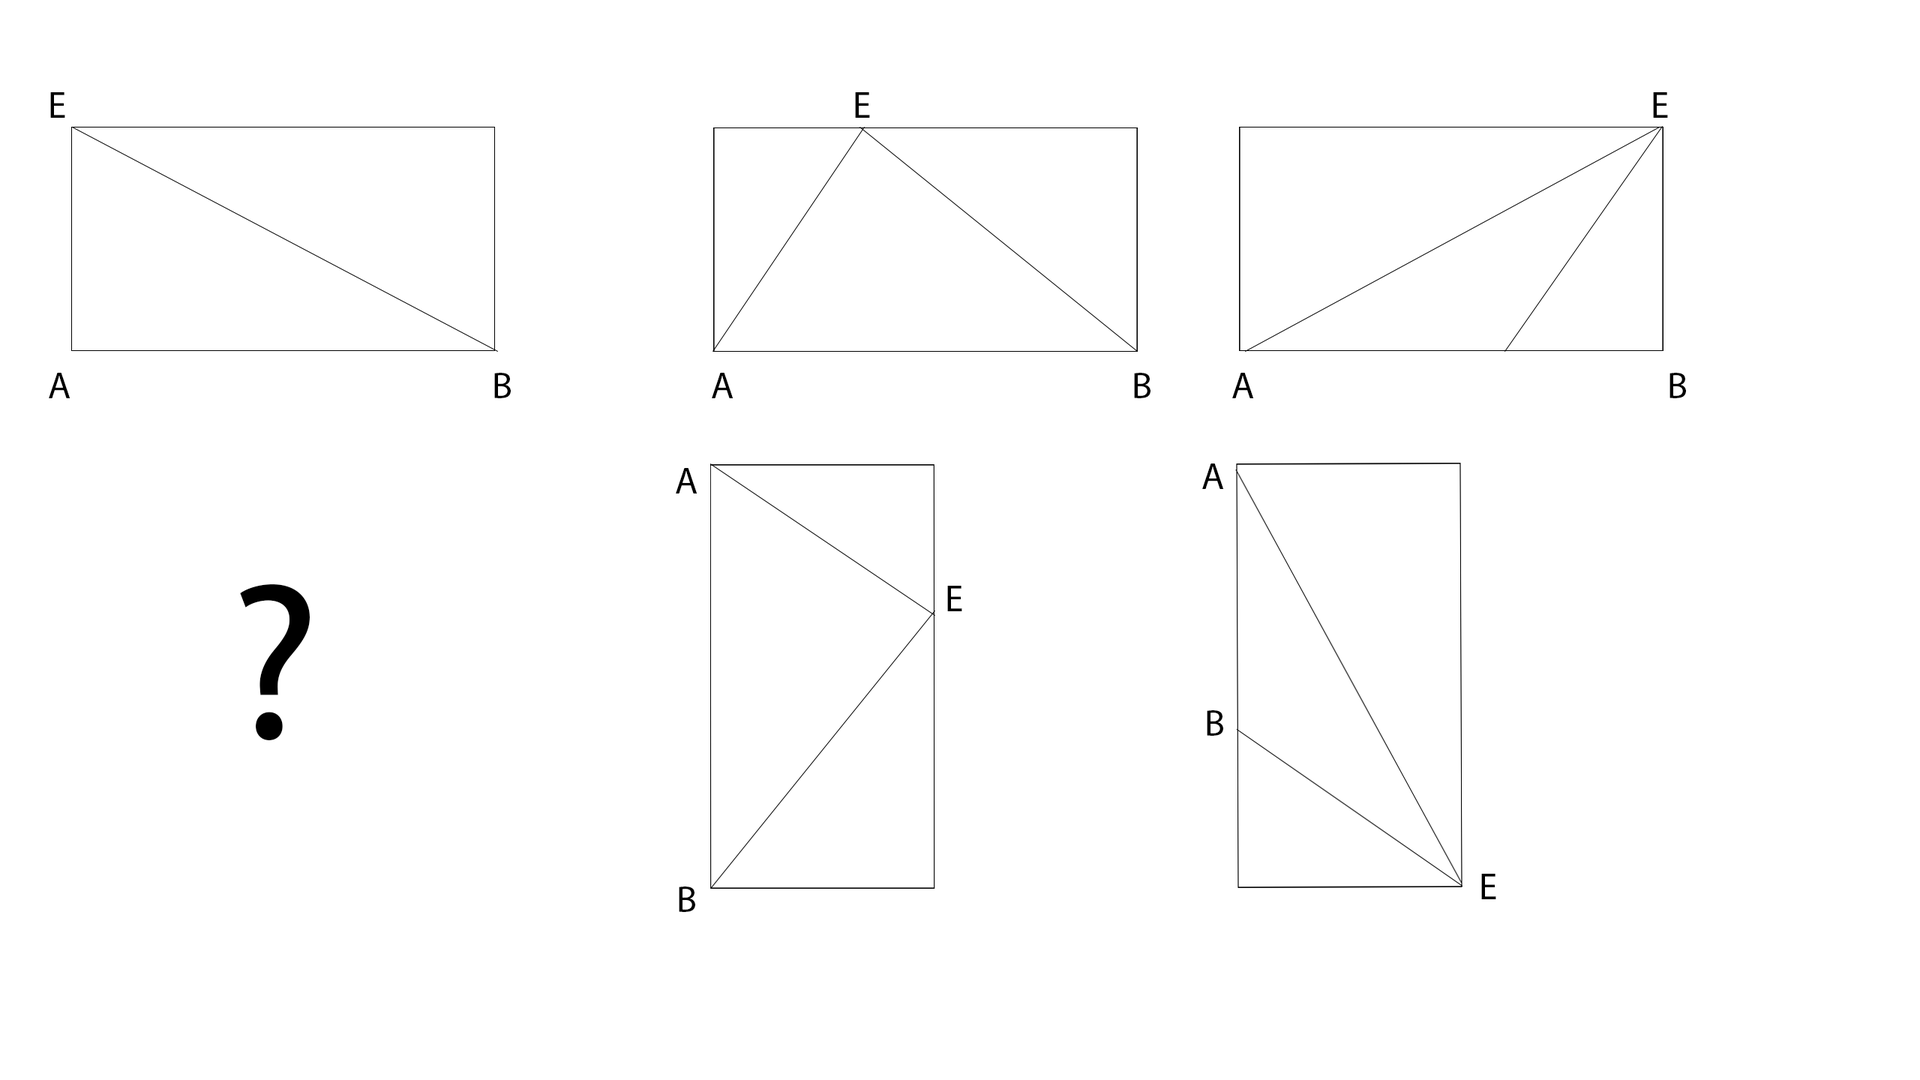
<style>
.page{position:relative;width:1920px;height:1080px;background:#ffffff}
.page>*{position:absolute;margin:0}
.t1{font:9px "MyriadPro-Regular";color:#000000}
.t2{font:225px "MyriadPro-Regular";color:#000000}
</style>
<div class="page">
<p class="t1" style="left:50px;top:92px;width:1618px;height:26px">E                                                                                                   E                                                                                                  E</p>
<p class="t1" style="left:49px;top:373px;width:1637px;height:25px">A                                                     B                         A                                                  B          A                                                    B</p>
<p class="t1" style="left:676px;top:468px;width:22px;height:26px">A</p>
<p class="t1" style="left:1202px;top:464px;width:22px;height:25px">A</p>
<p class="t2" style="left:240px;top:584px;width:70px;height:156px">?</p>
<p class="t1" style="left:947px;top:586px;width:15px;height:25px">E</p>
<p class="t1" style="left:1207px;top:710px;width:16px;height:26px">B</p>
<p class="t1" style="left:1481px;top:874px;width:15px;height:25px">E</p>
<p class="t1" style="left:679px;top:886px;width:16px;height:26px">B</p>
</div>
